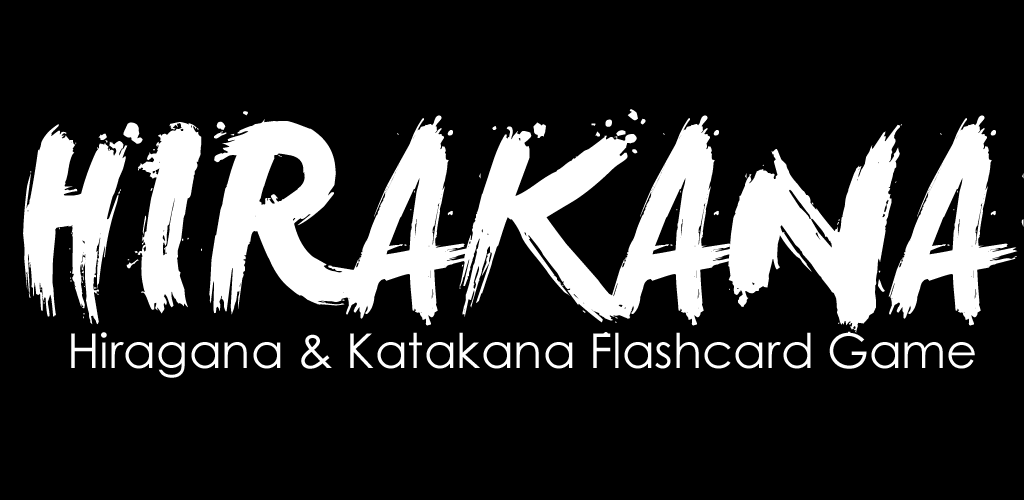
<style>
.page{position:relative;width:1024px;height:500px;background:#000000}
.page>*{position:absolute;margin:0}
.t1{font:240.2px "LeviReBrushed";color:#ffffff}
.t2{font:48px "CenturyGothic";color:#ffffff}
</style>
<div class="page">
<p class="t1" style="left:23px;top:109px;width:1001px;height:226px">HIRAKANA</p>
<p class="t2" style="left:71px;top:332px;width:904px;height:46px">Hiragana &amp; Katakana Flashcard Game</p>
</div>
